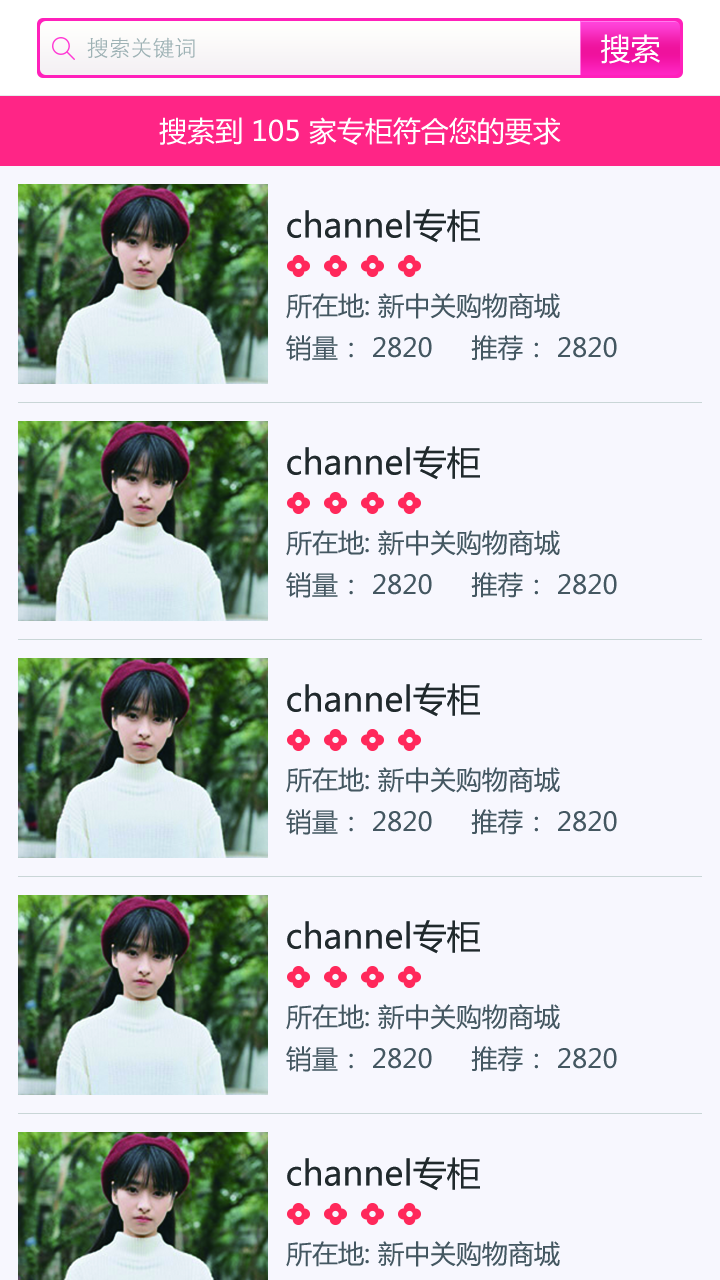
<style>
.page{position:relative;width:720px;height:1280px;background:#f7f7fe}
.page>*{position:absolute;margin:0}
.t1{font:22px "STXihei";color:#9eb2b5}
.t2{font:30px "MicrosoftYaHei";color:#ffffff}
.t3{font:28px "MicrosoftYaHei";color:#ffffff}
.t4{font:34px "MicrosoftYaHei";color:#20292c}
.t5{font:26px "MicrosoftYaHei";color:#435761}
</style>
<div class="page">
<p class="t1" style="left:87px;top:37px;width:108px;height:21px">搜索关键词</p>
<p class="t2" style="left:601px;top:34px;width:59px;height:30px">搜索</p>
<p class="t3" style="left:159px;top:117px;width:402px;height:28px">搜索到 105 家专柜符合您的要求</p>
<p class="t4" style="left:287px;top:209px;width:193px;height:34px">channel专柜</p>
<p class="t5" style="left:286px;top:293px;width:274px;height:26px">所在地: 新中关购物商城</p>
<p class="t5" style="left:286px;top:335px;width:331px;height:26px">销量： 2820     推荐： 2820</p>
<p class="t4" style="left:287px;top:446px;width:193px;height:34px">channel专柜</p>
<p class="t5" style="left:286px;top:530px;width:274px;height:26px">所在地: 新中关购物商城</p>
<p class="t5" style="left:286px;top:572px;width:331px;height:26px">销量： 2820     推荐： 2820</p>
<p class="t4" style="left:287px;top:683px;width:193px;height:34px">channel专柜</p>
<p class="t5" style="left:286px;top:767px;width:274px;height:26px">所在地: 新中关购物商城</p>
<p class="t5" style="left:286px;top:809px;width:331px;height:26px">销量： 2820     推荐： 2820</p>
<p class="t4" style="left:287px;top:920px;width:193px;height:34px">channel专柜</p>
<p class="t5" style="left:286px;top:1004px;width:274px;height:26px">所在地: 新中关购物商城</p>
<p class="t5" style="left:286px;top:1046px;width:331px;height:26px">销量： 2820     推荐： 2820</p>
<p class="t4" style="left:287px;top:1157px;width:193px;height:34px">channel专柜</p>
<p class="t5" style="left:286px;top:1241px;width:274px;height:26px">所在地: 新中关购物商城</p>
</div>
